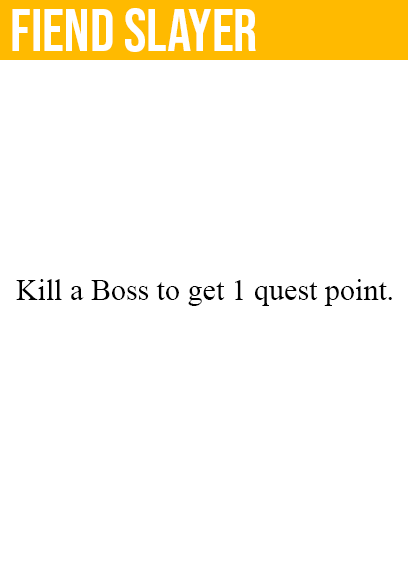
<style>
.page{position:relative;width:408px;height:585px;background:#ffffff}
.page>*{position:absolute;margin:0}
.t1{font:60px "BebasNeue-Regular";color:#ffffff}
.t2{font:30px "TimesNewRomanPSMT";color:#000000}
</style>
<div class="page">
<p class="t1" style="left:12px;top:8px;width:244px;height:44px">fiend slayer</p>
<p class="t2" style="left:16px;top:279px;width:376px;height:27px">Kill a Boss to get 1 quest point.</p>
</div>
